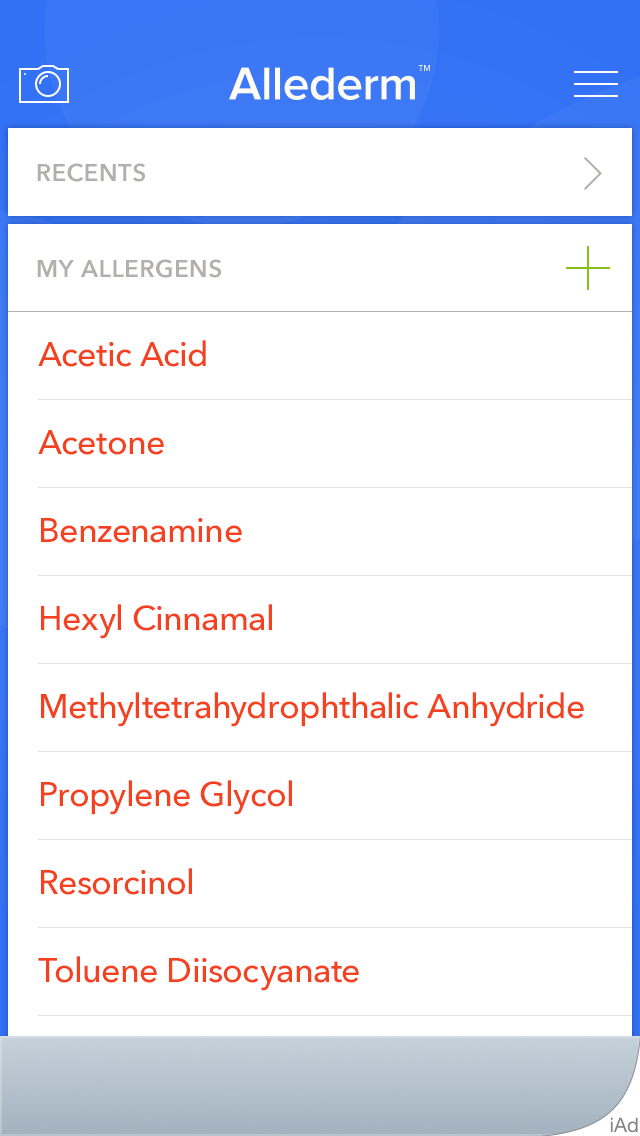
<style>
.page{position:relative;width:640px;height:1136px;background:#ffffff}
.page>*{position:absolute;margin:0}
.t1{font:24px "AvenirNext-DemiBold";letter-spacing:0.025em;color:#b3b0ab;text-transform:uppercase}
.t2{font:34px/88px "AvenirNext-Medium";letter-spacing:-0.01em;color:#f44220}
</style>
<div class="page">
<p class="t1" style="left:37px;top:163px;width:108px;height:19px">Recents</p>
<p class="t1" style="left:37px;top:259px;width:184px;height:19px">My Allergens</p>
<p class="t2" style="left:38px;top:340px;width:546px;height:739px">Acetic Acid<br>Acetone<br>Benzenamine<br>Hexyl Cinnamal<br>Methyltetrahydrophthalic Anhydride<br>Propylene Glycol<br>Resorcinol<br>Toluene Diisocyanate<br>Trimethicone Phenyl</p>
</div>
